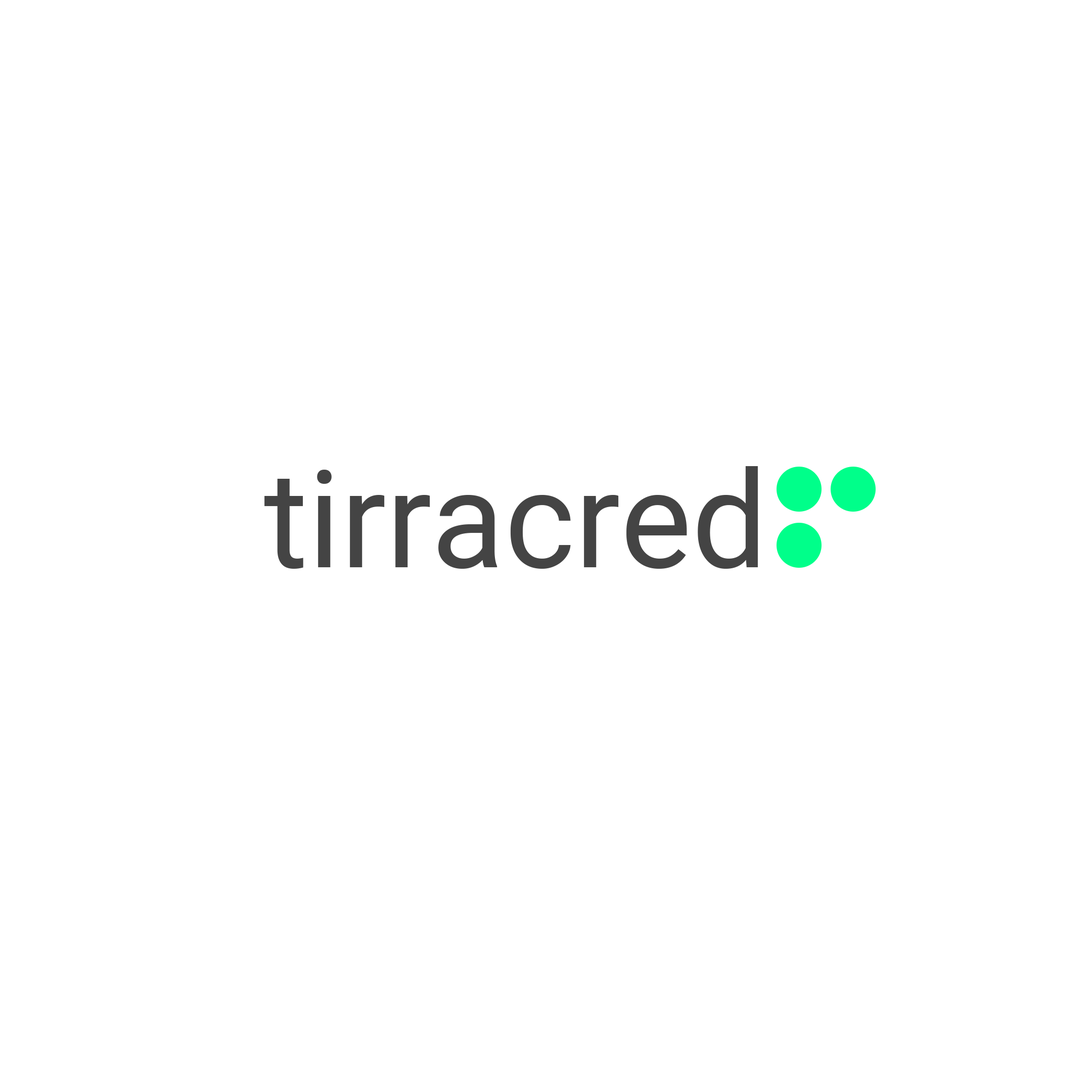
<style>
.page{position:relative;width:1092px;height:1092px;background:#ffffff}
.page>*{position:absolute;margin:0}
.t1{font:134.3px "Roboto-Regular";color:#444444}
</style>
<div class="page">
<p class="t1" style="left:264px;top:466px;width:494px;height:103px">tirracred</p>
</div>
